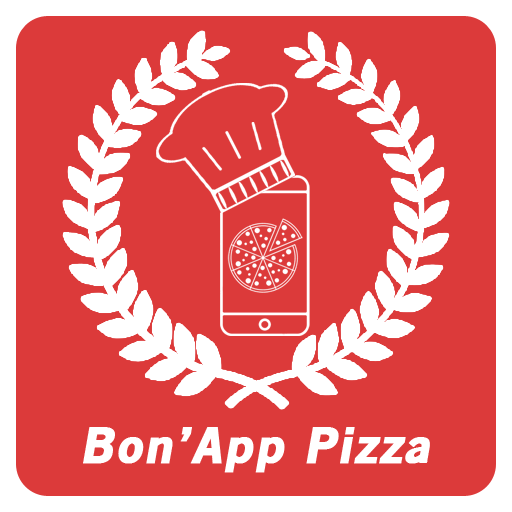
<style>
.page{position:relative;width:512px;height:512px;background:#dc3a3a}
.page>*{position:absolute;margin:0}
.t1{font:48px "OldSansBlack";letter-spacing:0.05em;color:#ffffff;font-weight:bold;font-style:italic}
</style>
<div class="page">
<p class="t1" style="left:83px;top:427px;width:347px;height:46px">Bon’App Pizza</p>
</div>
